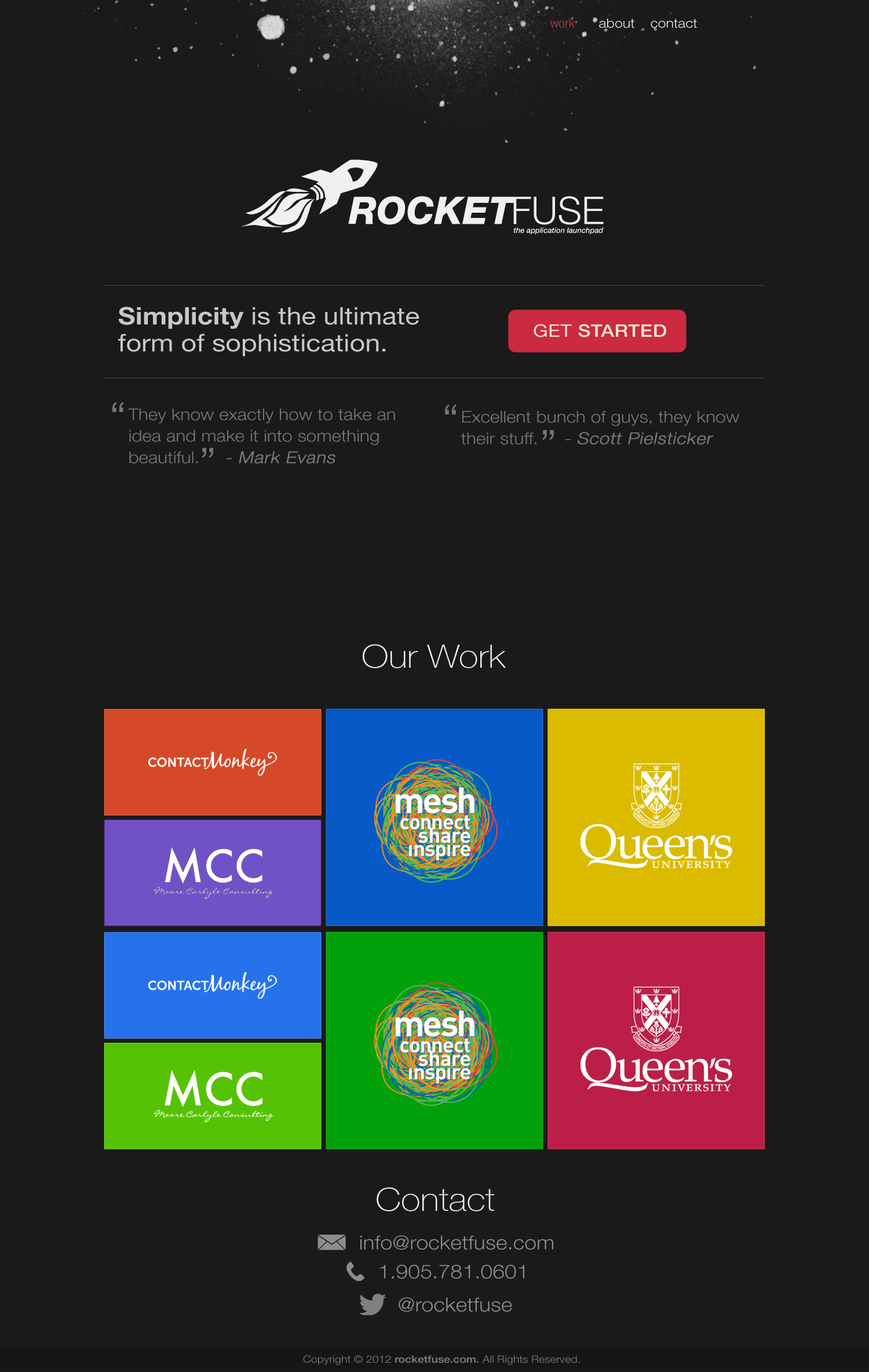
<style>
.page{position:relative;width:869px;height:1372px;background:#1a1a1a}
.page>*{position:absolute;margin:0}
.t1{font:12.9px "HelveticaNeue-LightCond";color:#cc2a41;scale:1.12 1}
.t2{font:12.9px "HelveticaNeue-Light";color:#ffffff;scale:1.12 1}
.t3{font:24.1px/26.9px "HelveticaNeue-Roman";color:#c8c8c8;scale:1.12 1}
.t4{font:24.1px/26.9px "HelveticaNeue-Bold";color:#c8c8c8;scale:1.12 1}
.t5{font:17.3px "HelveticaNeue-Medium";letter-spacing:0.02em;color:#f4ead5;scale:1.12 1}
.t6{font:17.3px "HelveticaNeue-Roman";letter-spacing:0.02em;color:#f4ead5;scale:1.12 1}
.t7{font:40.3px "HelveticaNeue-Light";color:#787878;scale:1.12 1}
.t8{font:16.3px/21.5px "HelveticaNeue-Light";color:#787878;scale:1.12 1}
.t9{font:16.3px/21.5px "HelveticaNeue-Light";color:#787878;font-weight:bold;font-style:italic;scale:1.12 1}
.t10{font:32.2px "HelveticaNeue-Thin";color:#f0f0f0;scale:1.12 1}
.t11{font:19.3px "HelveticaNeue-Light";color:#8d8d8d;scale:1.12 1}
.t12{font:10.1px "HelveticaNeue-Light";color:#818181;scale:1.12 1}
.t13{font:10.1px "HelveticaNeue-Medium";color:#818181;scale:1.12 1}
</style>
<div class="page">
<p class="t1" style="left:550px;top:18px;width:25px;height:10px">work</p>
<p class="t2" style="left:599px;top:18px;width:36px;height:10px">about</p>
<p class="t2" style="left:651px;top:19px;width:46px;height:9px">contact</p>
<p class="t3" style="left:118px;top:307px;width:302px;height:49px"><span class="t4">Simplicity </span>is the ultimate<br>form of sophistication.</p>
<p class="t5" style="left:534px;top:324px;width:132px;height:13px"><span class="t6">GET </span>STARTED</p>
<p class="t7" style="left:112px;top:402px;width:11px;height:10px">“</p>
<p class="t8" style="left:128px;top:408px;width:267px;height:56px">They know exactly how to take an idea and make it into something beautiful.     <span class="t9">- Mark Evans</span></p>
<p class="t7" style="left:445px;top:405px;width:12px;height:9px">“</p>
<p class="t8" style="left:461px;top:411px;width:278px;height:33px">Excellent bunch of guys, they know their stuff.     <span class="t9">- Scott Pielsticker</span></p>
<p class="t7" style="left:542px;top:430px;width:12px;height:10px">”</p>
<p class="t7" style="left:202px;top:447px;width:11px;height:11px">”</p>
<p class="t10" style="left:363px;top:644px;width:144px;height:24px">Our Work</p>
<p class="t10" style="left:377px;top:1187px;width:118px;height:24px">Contact</p>
<p class="t11" style="left:360px;top:1235px;width:193px;height:14px">info@rocketfuse.com</p>
<p class="t11" style="left:380px;top:1265px;width:144px;height:13px">1.905.781.0601</p>
<p class="t11" style="left:399px;top:1297px;width:113px;height:14px">@rocketfuse</p>
<p class="t12" style="left:303px;top:1355px;width:277px;height:10px">Copyright © 2012 <span class="t13">rocketfuse.com. </span>All Rights Reserved.</p>
</div>
